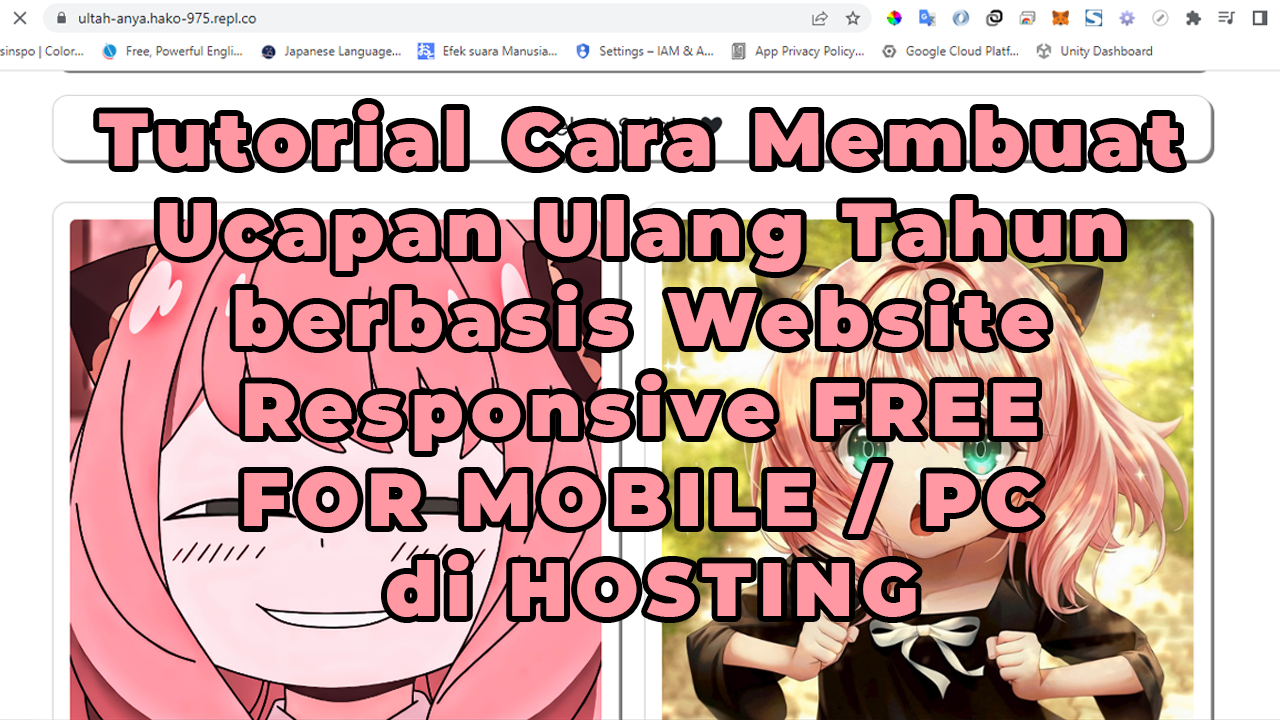
<style>
.page{position:relative;width:1280px;height:720px;background:#ffffff}
.page>*{position:absolute;margin:0}
.t1{font:75px "Montserrat-Black";letter-spacing:0.1em;color:#ff98a3}
</style>
<div class="page">
<p class="t1" style="left:99px;top:104px;width:1082px;height:513px;text-align:center">Tutorial Cara Membuat <br>Ucapan Ulang Tahun <br>berbasis Website <br>Responsive FREE <br>FOR MOBILE / PC <br>di HOSTING</p>
</div>
